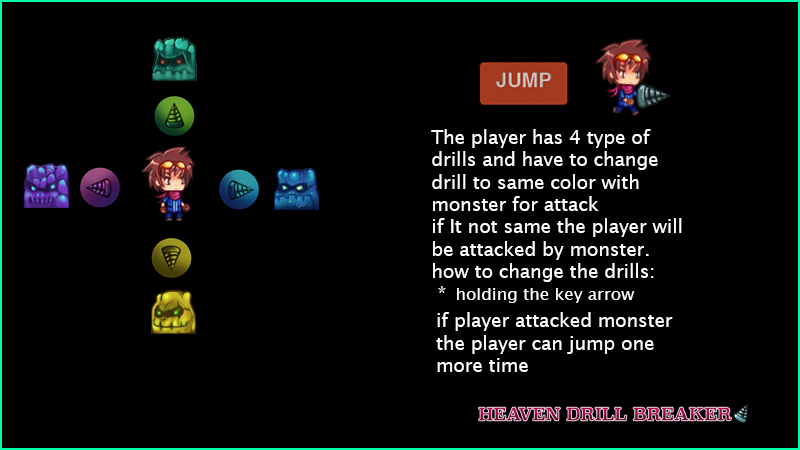
<style>
.page{position:relative;width:800px;height:450px;background:#000000}
.page>*{position:absolute;margin:0}
.t1{font:18.6px "LucidaGrande";color:#ffffff}
.t2{font:16.8px "LucidaGrande";color:#ffffff}
</style>
<div class="page">
<p class="t1" style="left:431px;top:129px;width:251px;height:174px">The player has 4 type of<br>drills and have to change <br>drill to same color with <br>monster for attack<br>if It not same the player will<br>be attacked by monster.<br>how to change the drills:<br> * <span class="t2">holding the key arrow</span></p>
<p class="t1" style="left:436px;top:312px;width:237px;height:60px">if player attacked monster<br>the player can jump one <br>more time</p>
</div>
